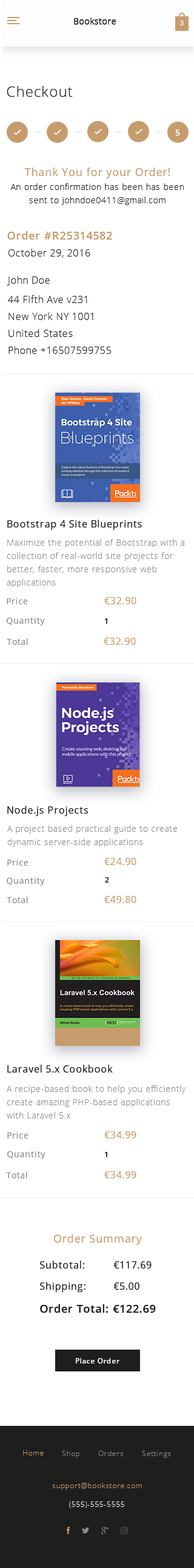
<style>
.page{position:relative;width:194px;height:1568px;background:#ffffff}
.page>*{position:absolute;margin:0}
.t1{font:14.5px "OpenSans-Light";letter-spacing:0.05em;color:#1e1e1c}
.t2{font:8.5px "OpenSans-Semibold";letter-spacing:0.05em;color:#ffffff}
.t3{font:10.9px "OpenSans";letter-spacing:0.05em;color:#c69c6d}
.t4{font:8.5px/13.3px "OpenSans-Light";letter-spacing:0.05em;color:#1e1e1c}
.t5{font:10.9px "OpenSans-Semibold";letter-spacing:0.05em;color:#c69c6d}
.t6{font:9.7px "OpenSans-Light";letter-spacing:0.05em;color:#1e1e1c}
.t7{font:9.7px/16.9px "OpenSans-Light";letter-spacing:0.05em;color:#1e1e1c}
.t8{font:9.7px/19.4px "OpenSans-Light";letter-spacing:0.05em;color:#1e1e1c}
.t9{font:9.7px "OpenSans";letter-spacing:0.05em;color:#1e1e1c}
.t10{font:8.5px/13.3px "OpenSans-Light";letter-spacing:0.05em;color:#8c8c8c}
.t11{font:8.5px "OpenSans";letter-spacing:0.05em;color:#8c8c8c}
.t12{font:9.7px "OpenSans";letter-spacing:0.05em;color:#c69c6d}
.t13{font:7.3px "OpenSans-Semibold";letter-spacing:0.05em;color:#1e1e1c}
.t14{font:10.9px "OpenSans-Semibold";letter-spacing:0.05em;color:#1e1e1c}
.t15{font:7.3px "OpenSans-Semibold";letter-spacing:0.05em;color:#fffefe}
</style>
<div class="page">
<p class="t1" style="left:7px;top:86px;width:66px;height:11px">Checkout</p>
<p class="t2" style="left:175px;top:129px;width:5px;height:7px">5</p>
<p class="t3" style="left:24px;top:168px;width:145px;height:10px">Thank You for your Order!</p>
<p class="t4" style="left:10px;top:183px;width:173px;height:22px;text-align:center">An order confirmation has been has been sent to johndoe0411@gmail.com</p>
<p class="t5" style="left:7px;top:231px;width:105px;height:9px">Order #R25314582</p>
<p class="t6" style="left:8px;top:249px;width:82px;height:9px">October 29, 2016</p>
<p class="t7" style="left:7px;top:276px;width:104px;height:78px"><span class="t8">John Doe<br>44 Fifth Ave v231<br></span>New York NY 1001<br>United States<br>Phone +16507599755</p>
<p class="t9" style="left:7px;top:520px;width:135px;height:10px">Bootstrap 4 Site Blueprints</p>
<p class="t10" style="left:7px;top:539px;width:177px;height:48px">Maximize the potential of Bootstrap with a collection of real-world site projects for better, faster, more responsive web applications</p>
<p class="t11" style="left:7px;top:598px;width:21px;height:6px">Price</p>
<p class="t12" style="left:104px;top:597px;width:32px;height:7px">€32.90</p>
<p class="t11" style="left:7px;top:617px;width:38px;height:9px">Quantity</p>
<p class="t13" style="left:105px;top:618px;width:2px;height:6px">1</p>
<p class="t11" style="left:7px;top:638px;width:21px;height:7px">Total</p>
<p class="t12" style="left:103px;top:638px;width:33px;height:7px">€32.90</p>
<p class="t9" style="left:7px;top:806px;width:81px;height:10px">Node.js Projects</p>
<p class="t10" style="left:7px;top:825px;width:170px;height:22px">A project based practical guide to create dynamic server-side applications</p>
<p class="t12" style="left:104px;top:858px;width:32px;height:7px">€24.90</p>
<p class="t11" style="left:7px;top:859px;width:21px;height:7px">Price</p>
<p class="t11" style="left:7px;top:877px;width:38px;height:9px">Quantity</p>
<p class="t13" style="left:105px;top:877px;width:4px;height:6px">2</p>
<p class="t11" style="left:7px;top:897px;width:21px;height:6px">Total</p>
<p class="t12" style="left:104px;top:896px;width:32px;height:7px">€49.80</p>
<p class="t9" style="left:7px;top:1065px;width:106px;height:8px">Laravel 5.x Cookbook</p>
<p class="t10" style="left:7px;top:1085px;width:179px;height:34px">A recipe-based book to help you efficiently create amazing PHP-based applications with Laravel 5.x</p>
<p class="t11" style="left:7px;top:1132px;width:21px;height:6px">Price</p>
<p class="t12" style="left:104px;top:1131px;width:32px;height:7px">€34.99</p>
<p class="t11" style="left:7px;top:1151px;width:38px;height:8px">Quantity</p>
<p class="t13" style="left:105px;top:1152px;width:2px;height:5px">1</p>
<p class="t11" style="left:6px;top:1172px;width:21px;height:6px">Total</p>
<p class="t12" style="left:104px;top:1171px;width:32px;height:7px">€34.99</p>
<p class="t3" style="left:54px;top:1234px;width:88px;height:11px">Order Summary</p>
<p class="t9" style="left:40px;top:1261px;width:44px;height:8px">Subtotal:</p>
<p class="t9" style="left:113px;top:1261px;width:38px;height:8px">€117.69</p>
<p class="t9" style="left:40px;top:1282px;width:45px;height:10px">Shipping:</p>
<p class="t9" style="left:113px;top:1282px;width:26px;height:8px">€5.00</p>
<p class="t14" style="left:40px;top:1304px;width:68px;height:9px">Order Total:</p>
<p class="t14" style="left:113px;top:1305px;width:42px;height:8px">€122.69</p>
<p class="t15" style="left:76px;top:1358px;width:43px;height:6px">Place Order</p>
</div>
